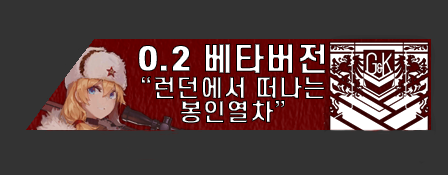
<style>
.page{position:relative;width:448px;height:175px;background:#333333}
.page>*{position:absolute;margin:0}
.t1{font:32px "S-CoreDream-7ExtraBold";font-weight:bold}
.t2{font:32px "S-CoreDream-9Black";font-weight:bold}
.t3{font:24px/24px "S-CoreDream-7ExtraBold";font-weight:bold}
</style>
<div class="page">
<p class="t1" style="left:138px;top:43px;width:188px;height:31px"><span class="t2">0.2 </span>베타버전</p>
<p class="t3" style="left:141px;top:76px;width:184px;height:48px;text-align:center">“런던에서 떠나는<br>봉인열차”</p>
</div>
